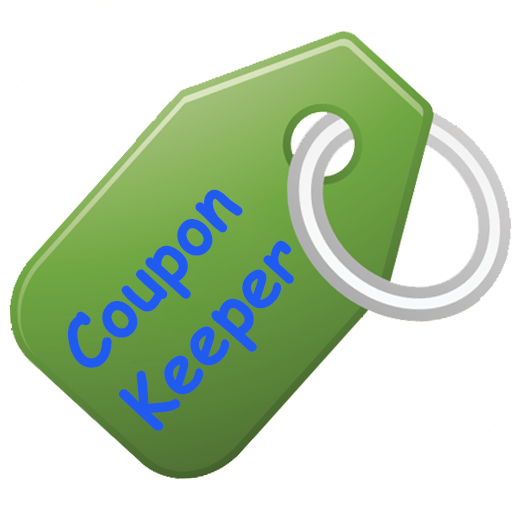
<style>
.page{position:relative;width:512px;height:512px;background:#ffffff}
.page>*{position:absolute;margin:0}
.t1{font:70px "ComicSansMS-Bold";color:#205aef}
</style>
<div class="page">
<p class="t1" style="left:68px;top:189px;width:226px;height:242px;rotate:-48deg">Coupon<br>Keeper</p>
</div>
